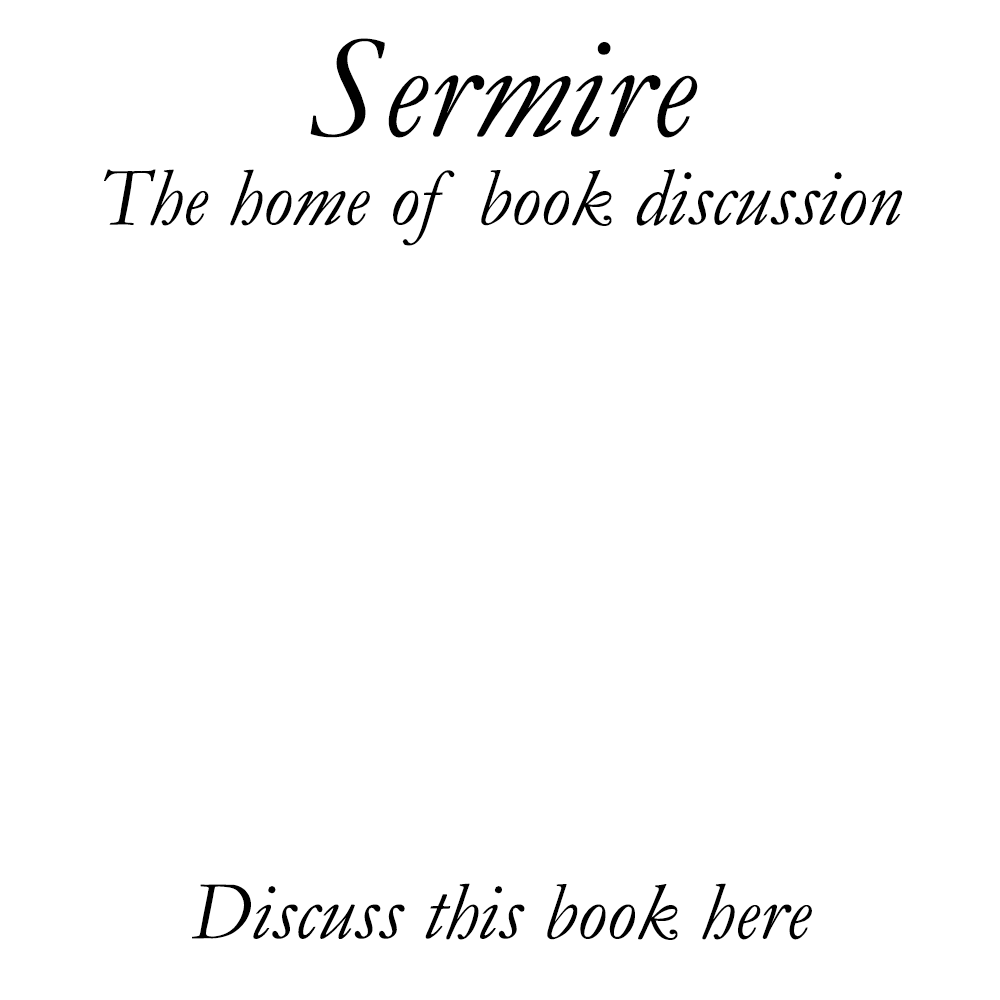
<style>
.page{position:relative;width:1000px;height:1000px;background:#ffffff}
.page>*{position:absolute;margin:0}
.t1{font:256px "Garamond-Italic";color:#000000}
.t2{font:143px "Garamond-Italic";color:#000000}
</style>
<div class="page">
<p class="t1" style="left:310px;top:38px;width:388px;height:100px">Sermire</p>
<p class="t2" style="left:104px;top:169px;width:799px;height:77px">The home of book discussion</p>
<p class="t2" style="left:192px;top:883px;width:620px;height:57px">Discuss this book here</p>
</div>
